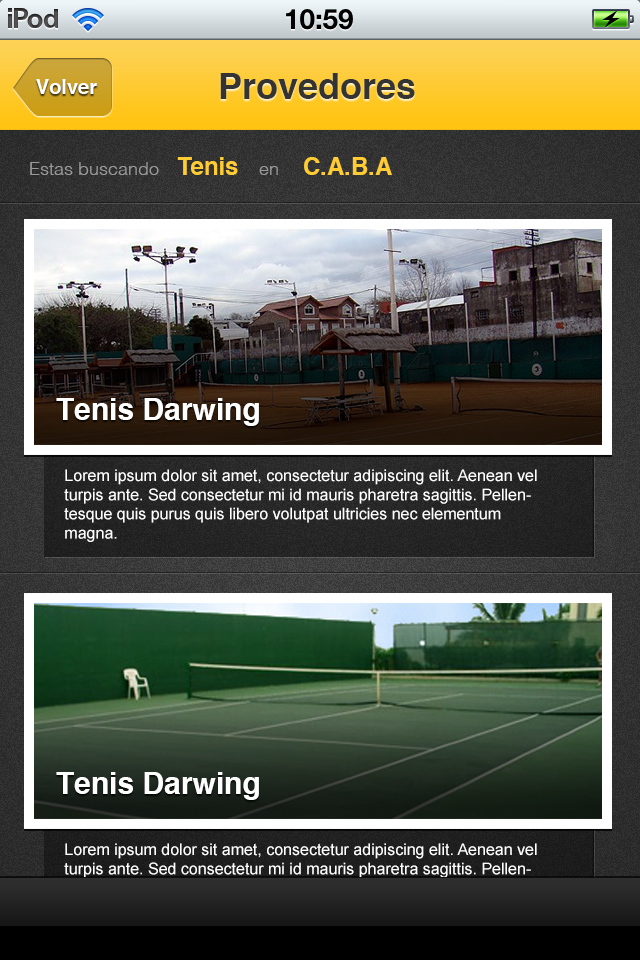
<style>
.page{position:relative;width:640px;height:960px}
.page>*{position:absolute;margin:0}
.t1{font:36px "Helvetica-Bold";color:#343434}
.t2{font:20px "Helvetica-Bold";color:#ffffff}
.t3{font:24px "Helvetica-Bold";color:#ffcc33}
.t4{font:18px "Helvetica-Light";color:#999999}
.t5{font:30px "Helvetica-Bold";color:#ffffff}
.t6{font:16px "ArialMT";color:#ffffff}
</style>
<div class="page">
<p class="t1" style="left:220px;top:73px;width:195px;height:26px">Provedores</p>
<p class="t2" style="left:36px;top:79px;width:61px;height:15px">Volver</p>
<p class="t3" style="left:177px;top:157px;width:61px;height:18px">Tenis</p>
<p class="t3" style="left:304px;top:157px;width:88px;height:18px">C.A.B.A</p>
<p class="t4" style="left:30px;top:162px;width:129px;height:13px">Estas buscando</p>
<p class="t4" style="left:259px;top:166px;width:19px;height:9px">en</p>
<p class="t5" style="left:56px;top:398px;width:203px;height:28px">Tenis Darwing</p>
<p class="t6" style="left:64px;top:469px;width:473px;height:73px">Lorem ipsum dolor sit amet, consectetur adipiscing elit. Aenean vel turpis ante. Sed consectetur mi id mauris pharetra sagittis. Pellentesque quis purus quis libero volutpat ultricies nec elementum magna.</p>
<p class="t5" style="left:56px;top:772px;width:203px;height:28px">Tenis Darwing</p>
<p class="t6" style="left:64px;top:843px;width:473px;height:73px">Lorem ipsum dolor sit amet, consectetur adipiscing elit. Aenean vel turpis ante. Sed consectetur mi id mauris pharetra sagittis. Pellentesque quis purus quis libero volutpat ultricies nec elementum magna.</p>
</div>
